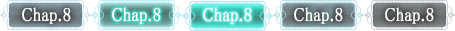
<style>
.page{position:relative;width:455px;height:31px}
.page>*{position:absolute;margin:0}
.t1{font:19px "MS-PMincho";color:#ffffff;font-weight:bold;scale:0.84 1}
</style>
<div class="page">
<p class="t1" style="left:22px;top:7px;width:49px;height:17px">Chap.8</p>
<p class="t1" style="left:112px;top:7px;width:49px;height:17px">Chap.8</p>
<p class="t1" style="left:203px;top:7px;width:49px;height:17px">Chap.8</p>
<p class="t1" style="left:294px;top:7px;width:49px;height:17px">Chap.8</p>
<p class="t1" style="left:385px;top:7px;width:49px;height:17px">Chap.8</p>
</div>
